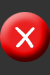
<style>
.page{position:relative;width:50px;height:75px;background:#333333}
.page>*{position:absolute;margin:0}
.t1{font:35.6px "DXHgrmB-KSCpc-EUC-H";letter-spacing:-0.025em;color:#ffffff}
</style>
<div class="page">
<p class="t1" style="left:15px;top:27px;width:20px;height:21px">X</p>
</div>
